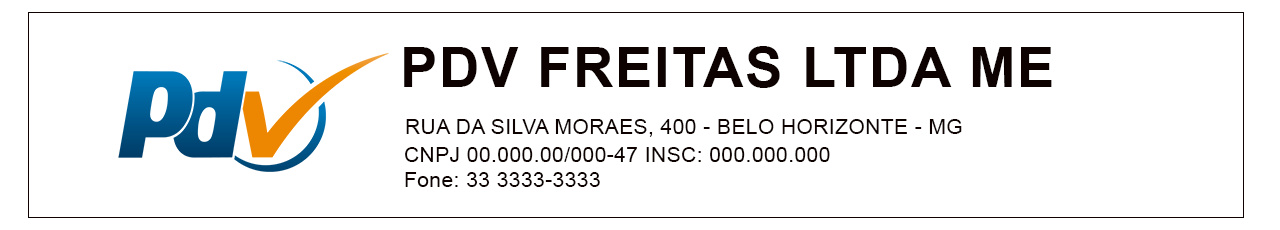
<style>
.page{position:relative;width:1280px;height:230px;background:#ffffff}
.page>*{position:absolute;margin:0}
.t1{font:56.4px "Arial-BoldMT";letter-spacing:0.025em;color:#0d0200}
.t2{font:20.8px "ArialMT";letter-spacing:0.025em;color:#0d0200}
</style>
<div class="page">
<p class="t1" style="left:404px;top:46px;width:648px;height:42px">PDV FREITAS LTDA ME</p>
<p class="t2" style="left:406px;top:119px;width:556px;height:18px">RUA DA SILVA MORAES, 400 - BELO HORIZONTE - MG</p>
<p class="t2" style="left:405px;top:147px;width:425px;height:15px">CNPJ 00.000.00/000-47 INSC: 000.000.000</p>
<p class="t2" style="left:405px;top:172px;width:195px;height:15px">Fone: 33 3333-3333</p>
</div>
